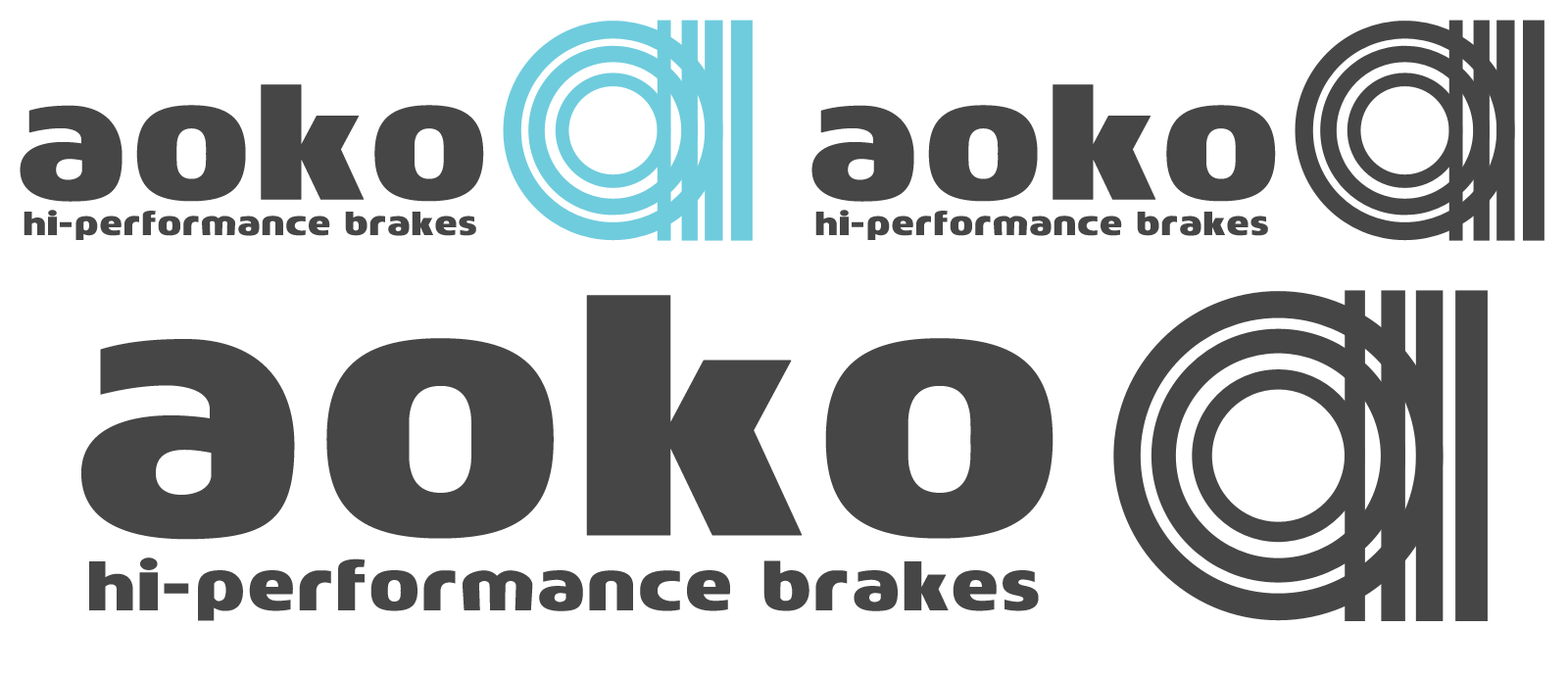
<style>
.page{position:relative;width:1568px;height:676px;background:#ffffff}
.page>*{position:absolute;margin:0}
.t1{font:148.8px "Mob";color:#464646;font-weight:bold}
.t2{font:30.3px "Mob";color:#464646;font-weight:bold}
.t3{font:312.6px "Mob";color:#464646;font-weight:bold}
.t4{font:63.7px "Mob";color:#464646;font-weight:bold}
</style>
<div class="page">
<p class="t1" style="left:20px;top:84px;width:464px;height:118px">aoko</p>
<p class="t1" style="left:811px;top:84px;width:465px;height:118px">aoko</p>
<p class="t2" style="left:24px;top:210px;width:452px;height:30px">hi-performance brakes</p>
<p class="t2" style="left:815px;top:210px;width:453px;height:30px">hi-performance brakes</p>
<p class="t3" style="left:81px;top:295px;width:973px;height:245px">aoko</p>
<p class="t4" style="left:89px;top:558px;width:950px;height:63px">hi-performance brakes</p>
</div>
